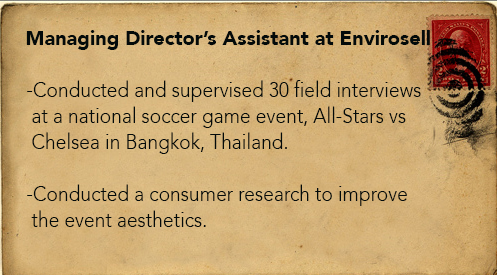
<style>
.page{position:relative;width:497px;height:275px}
.page>*{position:absolute;margin:0}
.t1{font:20px "Avenir-Black";color:#030a0a}
.t2{font:21.6px "Avenir-Light";color:#030a0a;scale:0.89 1}
</style>
<div class="page">
<p class="t1" style="left:26px;top:30px;width:404px;height:20px">Managing Director’s Assistant at Envirosell</p>
<p class="t2" style="left:27px;top:80px;width:394px;height:147px">-Conducted and supervised 30 field interviews<br> at a national soccer game event, All-Stars vs<br> Chelsea in Bangkok, Thailand.<br><br>-Conducted a consumer research to improve<br> the event aesthetics.</p>
</div>
